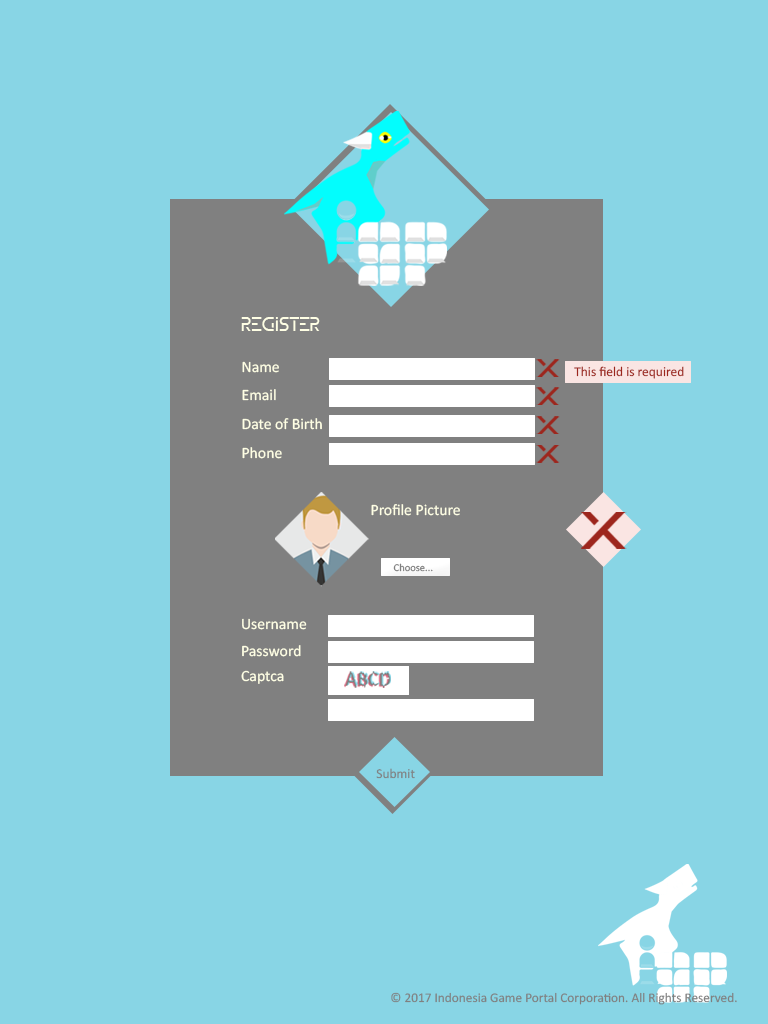
<style>
.page{position:relative;width:768px;height:1024px;background:#88d5e5}
.page>*{position:absolute;margin:0}
.t1{font:18.9px "ZELDA";color:#ffffe5}
.t2{font:15.7px "Calibri";color:#ffffe5}
.t3{font:13.4px "Calibri";color:#9d261d}
.t4{font:10.5px "Calibri";color:#808080}
.t5{font:13.4px "Calibri";color:#808080}
.t6{font:13.3px "Calibri";color:#808080}
</style>
<div class="page">
<p class="t1" style="left:241px;top:317px;width:79px;height:14px">Register</p>
<p class="t2" style="left:242px;top:361px;width:37px;height:12px">Name</p>
<p class="t3" style="left:574px;top:366px;width:110px;height:13px">This field is required</p>
<p class="t2" style="left:242px;top:389px;width:34px;height:12px">Email</p>
<p class="t2" style="left:242px;top:418px;width:80px;height:12px">Date of Birth</p>
<p class="t2" style="left:242px;top:447px;width:40px;height:12px">Phone</p>
<p class="t2" style="left:371px;top:504px;width:89px;height:12px">Profile Picture</p>
<p class="t4" style="left:393px;top:563px;width:40px;height:9px">Choose...</p>
<p class="t2" style="left:242px;top:618px;width:65px;height:12px">Username</p>
<p class="t2" style="left:242px;top:645px;width:59px;height:12px">Password</p>
<p class="t2" style="left:241px;top:670px;width:43px;height:14px">Captca</p>
<p class="t5" style="left:376px;top:768px;width:39px;height:11px">Submit</p>
<p class="t6" style="left:391px;top:992px;width:346px;height:13px">© 2017 Indonesia Game Portal Corporation. All Rights Reserved.</p>
</div>
